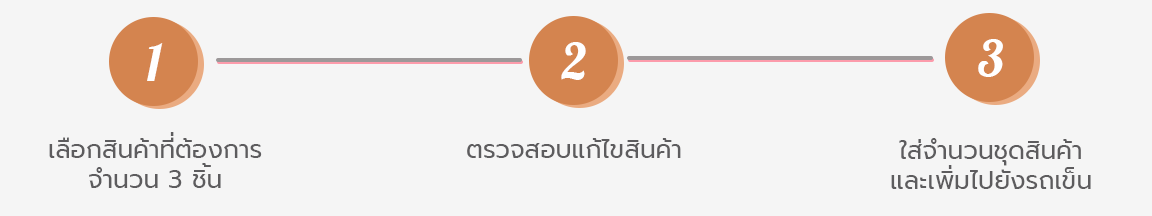
<style>
.page{position:relative;width:1152px;height:216px;background:#f5f5f5}
.page>*{position:absolute;margin:0}
.t1{font:50px "Lobster-Regular";color:#ffffff}
.t2{font:25px "Prompt-Regular";color:#5d5c5e}
</style>
<div class="page">
<p class="t1" style="left:978px;top:39px;width:25px;height:38px">3</p>
<p class="t1" style="left:147px;top:43px;width:16px;height:38px">1</p>
<p class="t1" style="left:561px;top:42px;width:25px;height:38px">2</p>
<p class="t2" style="left:49px;top:137px;width:213px;height:51px;text-align:center">เลือกสินค้าทีต้องการ<br>จำนวน 3 ชิน</p>
<p class="t2" style="left:170px;top:132px;width:4px;height:4px">่</p>
<p class="t2" style="left:467px;top:138px;width:214px;height:20px">ตรวจสอบแก้ไขสินค้า</p>
<p class="t2" style="left:891px;top:138px;width:200px;height:51px;text-align:center">ใส่จำนวนชุดสินค้า<br>และเพิมไปยังรถเข็น</p>
<p class="t2" style="left:202px;top:163px;width:9px;height:4px">้</p>
<p class="t2" style="left:948px;top:165px;width:4px;height:4px">่</p>
</div>
